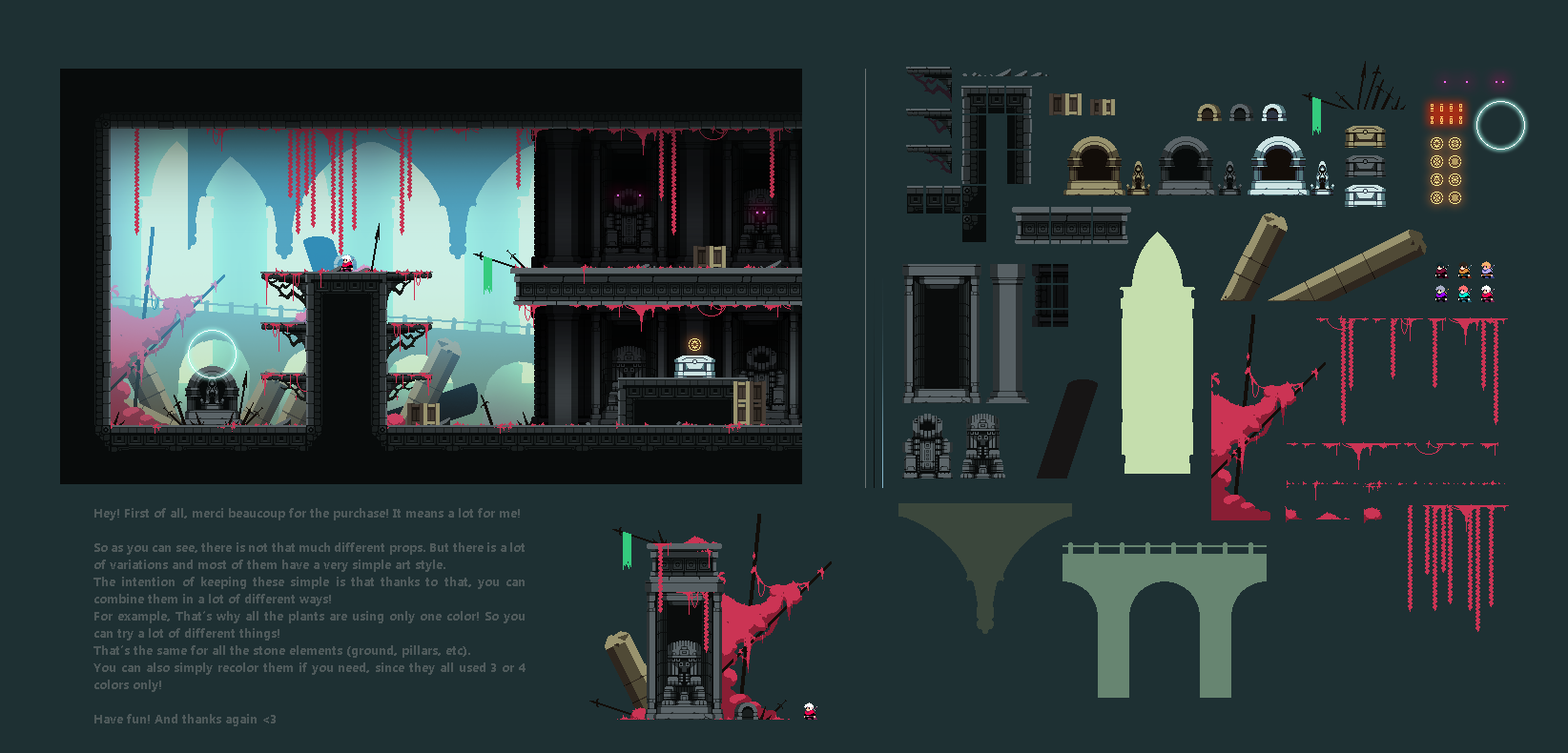
<style>
.page{position:relative;width:1568px;height:753px;background:#1e3033}
.page>*{position:absolute;margin:0}
.t1{font:12.4px/17.2px "Ebrima-Bold";color:#4f5a5b}
</style>
<div class="page">
<p class="t1" style="left:93px;top:508px;width:433px;height:219px;text-align:justify">Hey! First of all, merci beaucoup for the purchase! It means a lot for me!<br><br>So as you can see, there is not that much different props. But there is a lot of variations and most of them have a very simple art style. <br>The intention of keeping these simple is that thanks to that, you can combine them in a lot of different ways! <br>For example, That’s why all the plants are using only one color! So you can try a lot of different things!<br>That’s the same for all the stone elements (ground, pillars, etc).<br>You can also simply recolor them if you need, since they all used 3 or 4 colors only!<br><br>Have fun! And thanks again &lt;3</p>
</div>
